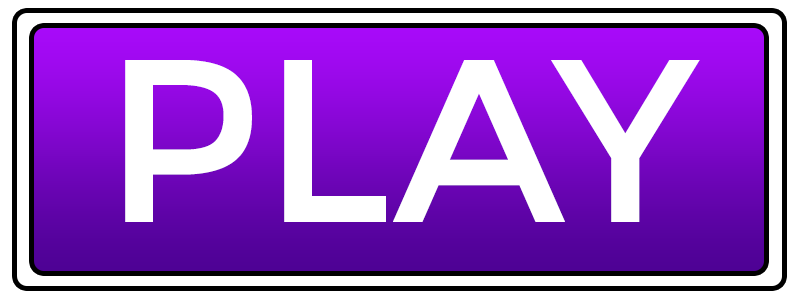
<style>
.page{position:relative;width:800px;height:300px;background:#ffffff}
.page>*{position:absolute;margin:0}
.t1{font:231.7px "Montserrat-Regular";color:#ffffff}
</style>
<div class="page">
<p class="t1" style="left:125px;top:60px;width:575px;height:162px">PLAY</p>
</div>
